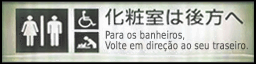
<style>
.page{position:relative;width:256px;height:64px}
.page>*{position:absolute;margin:0}
.t1{font:10.4px/10.7px "DejaVuSansCondensed";color:#636363;font-weight:bold;scale:0.88 1}
</style>
<div class="page">
<p class="t1" style="left:105px;top:30px;width:143px;height:22px">Para os banheiros,<br>Volte em direção ao seu traseiro.</p>
</div>
